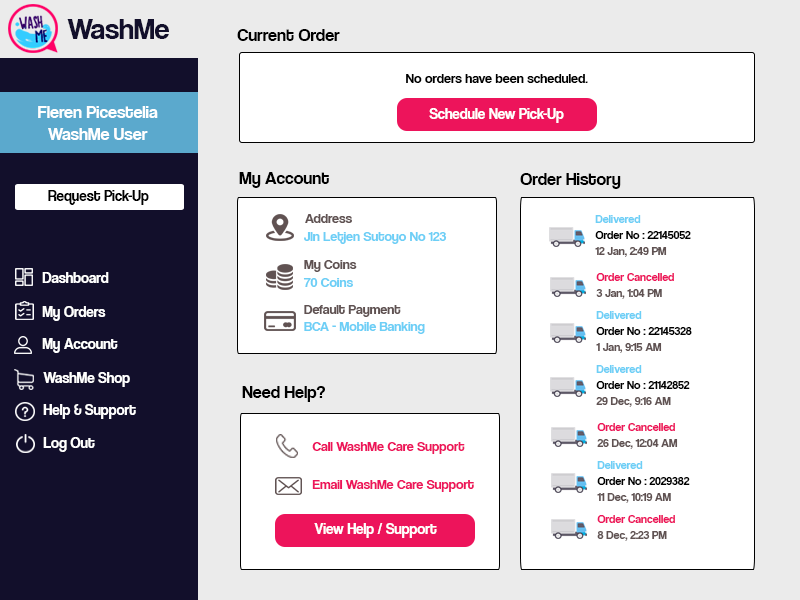
<style>
.page{position:relative;width:800px;height:600px;background:#ffffff}
.page>*{position:absolute;margin:0}
.t1{font:30px "CoolveticaRg-Regular";color:#120f2b}
.t2{font:18px "CoolveticaRg-Regular";color:#000000}
.t3{font:14px "CoolveticaRg-Regular";color:#000000}
.t4{font:18px "CoolveticaRg-Regular";color:#ffffff}
.t5{font:15px "CoolveticaRg-Regular";color:#ffffff}
.t6{font:15px "CoolveticaRg-Regular";color:#000000}
.t7{font:14px "CoolveticaRg-Regular";color:#605252}
.t8{font:12px "CoolveticaRg-Regular";color:#6dcff6}
.t9{font:14px "CoolveticaRg-Regular";color:#6dcff6}
.t10{font:12px "CoolveticaRg-Regular";color:#000000}
.t11{font:12px "CoolveticaRg-Regular";color:#605252}
.t12{font:12px "CoolveticaRg-Regular";color:#ed145b}
.t13{font:14px "CoolveticaRg-Regular";color:#ed145b}
</style>
<div class="page">
<p class="t1" style="left:67px;top:19px;width:102px;height:20px">WashMe</p>
<p class="t2" style="left:237px;top:29px;width:103px;height:12px">Current Order</p>
<p class="t3" style="left:406px;top:74px;width:182px;height:9px">No orders have been scheduled.</p>
<p class="t4" style="left:38px;top:106px;width:120px;height:34px;text-align:center">Fleren Picestelia<br>WashMe User</p>
<p class="t5" style="left:429px;top:108px;width:135px;height:15px">Schedule New Pick-Up</p>
<p class="t2" style="left:239px;top:172px;width:90px;height:16px">My Account</p>
<p class="t2" style="left:520px;top:173px;width:101px;height:16px">Order History</p>
<p class="t6" style="left:48px;top:190px;width:101px;height:15px">Request Pick-Up</p>
<p class="t7" style="left:305px;top:214px;width:47px;height:9px">Address</p>
<p class="t8" style="left:595px;top:215px;width:46px;height:8px">Delivered</p>
<p class="t9" style="left:304px;top:232px;width:143px;height:12px">Jln Letjen Sutoyo No 123</p>
<p class="t10" style="left:595px;top:231px;width:96px;height:8px">Order No : 22145052</p>
<p class="t11" style="left:595px;top:247px;width:72px;height:10px">12 Jan, 2:49 PM</p>
<p class="t7" style="left:304px;top:260px;width:53px;height:12px">My Coins</p>
<p class="t5" style="left:42px;top:272px;width:67px;height:11px">Dashboard</p>
<p class="t9" style="left:303px;top:278px;width:50px;height:9px">70 Coins</p>
<p class="t12" style="left:596px;top:273px;width:78px;height:8px">Order Cancelled</p>
<p class="t11" style="left:596px;top:289px;width:66px;height:10px">3 Jan, 1:04 PM</p>
<p class="t7" style="left:304px;top:305px;width:97px;height:12px">Default Payment</p>
<p class="t5" style="left:42px;top:306px;width:64px;height:15px">My Orders</p>
<p class="t8" style="left:596px;top:311px;width:46px;height:8px">Delivered</p>
<p class="t9" style="left:304px;top:322px;width:121px;height:12px">BCA - Mobile Banking</p>
<p class="t10" style="left:596px;top:327px;width:96px;height:8px">Order No : 22145328</p>
<p class="t5" style="left:42px;top:338px;width:76px;height:15px">My Account</p>
<p class="t11" style="left:596px;top:343px;width:66px;height:10px">1 Jan, 9:15 AM</p>
<p class="t8" style="left:596px;top:365px;width:46px;height:8px">Delivered</p>
<p class="t5" style="left:43px;top:372px;width:87px;height:15px">WashMe Shop</p>
<p class="t2" style="left:242px;top:386px;width:83px;height:16px">Need Help?</p>
<p class="t10" style="left:596px;top:381px;width:94px;height:8px">Order No : 21142852</p>
<p class="t11" style="left:596px;top:397px;width:75px;height:10px">29 Dec, 9:16 AM</p>
<p class="t5" style="left:43px;top:404px;width:93px;height:15px">Help &amp; Support</p>
<p class="t12" style="left:597px;top:423px;width:78px;height:8px">Order Cancelled</p>
<p class="t5" style="left:43px;top:437px;width:52px;height:15px">Log Out</p>
<p class="t13" style="left:312px;top:442px;width:153px;height:12px">Call WashMe Care Support</p>
<p class="t11" style="left:597px;top:439px;width:81px;height:10px">26 Dec, 12:04 AM</p>
<p class="t8" style="left:597px;top:461px;width:46px;height:8px">Delivered</p>
<p class="t13" style="left:312px;top:480px;width:162px;height:12px">Email WashMe Care Support</p>
<p class="t10" style="left:597px;top:477px;width:93px;height:8px">Order No : 2029382</p>
<p class="t11" style="left:597px;top:493px;width:74px;height:10px">11 Dec, 10:19 AM</p>
<p class="t12" style="left:597px;top:515px;width:78px;height:8px">Order Cancelled</p>
<p class="t5" style="left:314px;top:523px;width:123px;height:15px">View Help / Support</p>
<p class="t11" style="left:597px;top:531px;width:70px;height:10px">8 Dec, 2:23 PM</p>
</div>
